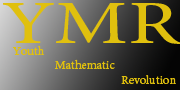
<style>
.page{position:relative;width:180px;height:90px}
.page>*{position:absolute;margin:0}
.t1{font:60.3px "AdobeHebrew-Regular";color:#e0c00e;scale:1.34 1}
.t2{font:12px "AdobeHebrew-Regular";color:#e0c00e}
</style>
<div class="page">
<p class="t1" style="left:3px;top:3px;width:178px;height:41px">YMR</p>
<p class="t2" style="left:12px;top:45px;width:164px;height:39px">Youth<br>   Mathematic<br>   Revolution</p>
</div>
